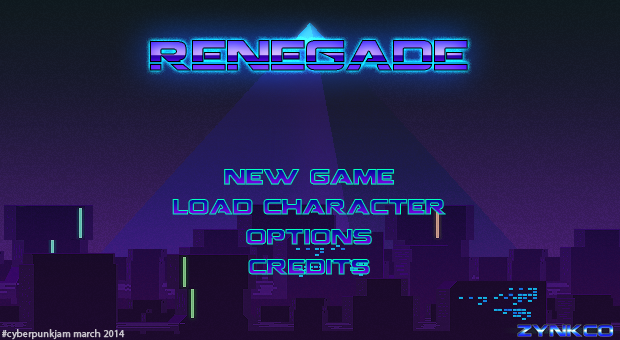
<style>
.page{position:relative;width:620px;height:340px}
.page>*{position:absolute;margin:0}
.t1{font:41.7px "Coalition";font-weight:bold}
.t2{font:20.8px "Coalition";font-weight:bold}
.t3{font:10px "MyriadPro-Regular";color:#c6c2ca;font-weight:bold}
</style>
<div class="page">
<p class="t1" style="left:150px;top:40px;width:318px;height:31px">renegade</p>
<p class="t2" style="left:224px;top:169px;width:170px;height:16px">new game</p>
<p class="t2" style="left:172px;top:199px;width:274px;height:16px">load character</p>
<p class="t2" style="left:246px;top:229px;width:126px;height:16px">options</p>
<p class="t2" style="left:248px;top:259px;width:122px;height:16px">credits</p>
<p class="t3" style="left:2px;top:329px;width:123px;height:11px">#cyberpunkjam march 2014</p>
</div>
